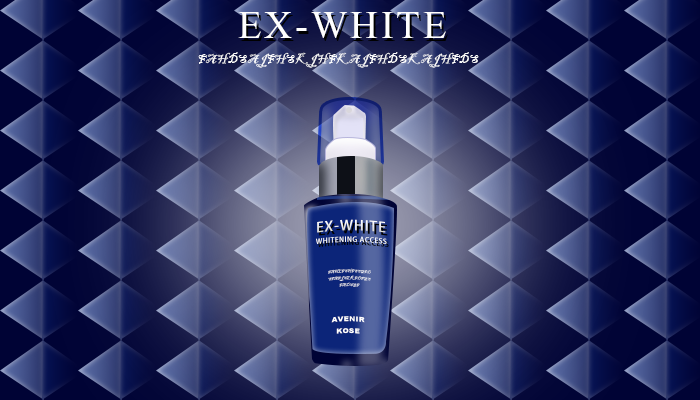
<style>
.page{position:relative;width:700px;height:400px}
.page>*{position:absolute;margin:0}
.t1{font:48px "Aparajita";letter-spacing:0.06em;color:#ffffff}
.t2{font:12px "BlackadderITC-Regular";letter-spacing:0.06em;color:#ffffff}
.t3{font:13.6px "AdobeHeitiStd-Regular";letter-spacing:0.06em;color:#ffffff;scale:1.05 1}
.t4{font:6.8px "AdobeHeitiStd-Regular";letter-spacing:0.06em;color:#ffffff;scale:1.05 1}
.t5{font:4px "BlackadderITC-Regular";letter-spacing:0.06em;scale:1.05 1}
.t6{font:6.8px "Arial-Black";letter-spacing:0.06em;color:#ffffff;scale:1.05 1}
</style>
<div class="page">
<p class="t1" style="left:238px;top:12px;width:208px;height:26px">EX-WHITE</p>
<p class="t2" style="left:198px;top:52px;width:281px;height:16px">FAHDSAJFHSKJHFKAJFHDSKAJHFDS</p>
<p class="t3" style="left:317px;top:219px;width:69px;height:14px">EX-WHITE</p>
<p class="t4" style="left:315px;top:236px;width:72px;height:9px">WHITENING ACCESS</p>
<p class="t5" style="left:328px;top:268px;width:43px;height:19px;text-align:center">FAHLFSHFSSGFD<br>SFAFJSLKFDFGS<br>FADSGF</p>
<p class="t6" style="left:331px;top:316px;width:34px;height:18px;text-align:center">AVENIR<br>KOSE</p>
</div>
